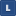
<style>
.page{position:relative;width:16px;height:16px;background:#264c84}
.page>*{position:absolute;margin:0}
.t1{font:9.6px "TitilliumWeb-Black";color:#d4dbe6;text-transform:uppercase}
</style>
<div class="page">
<p class="t1" style="left:6px;top:4px;width:5px;height:7px">L</p>
</div>
